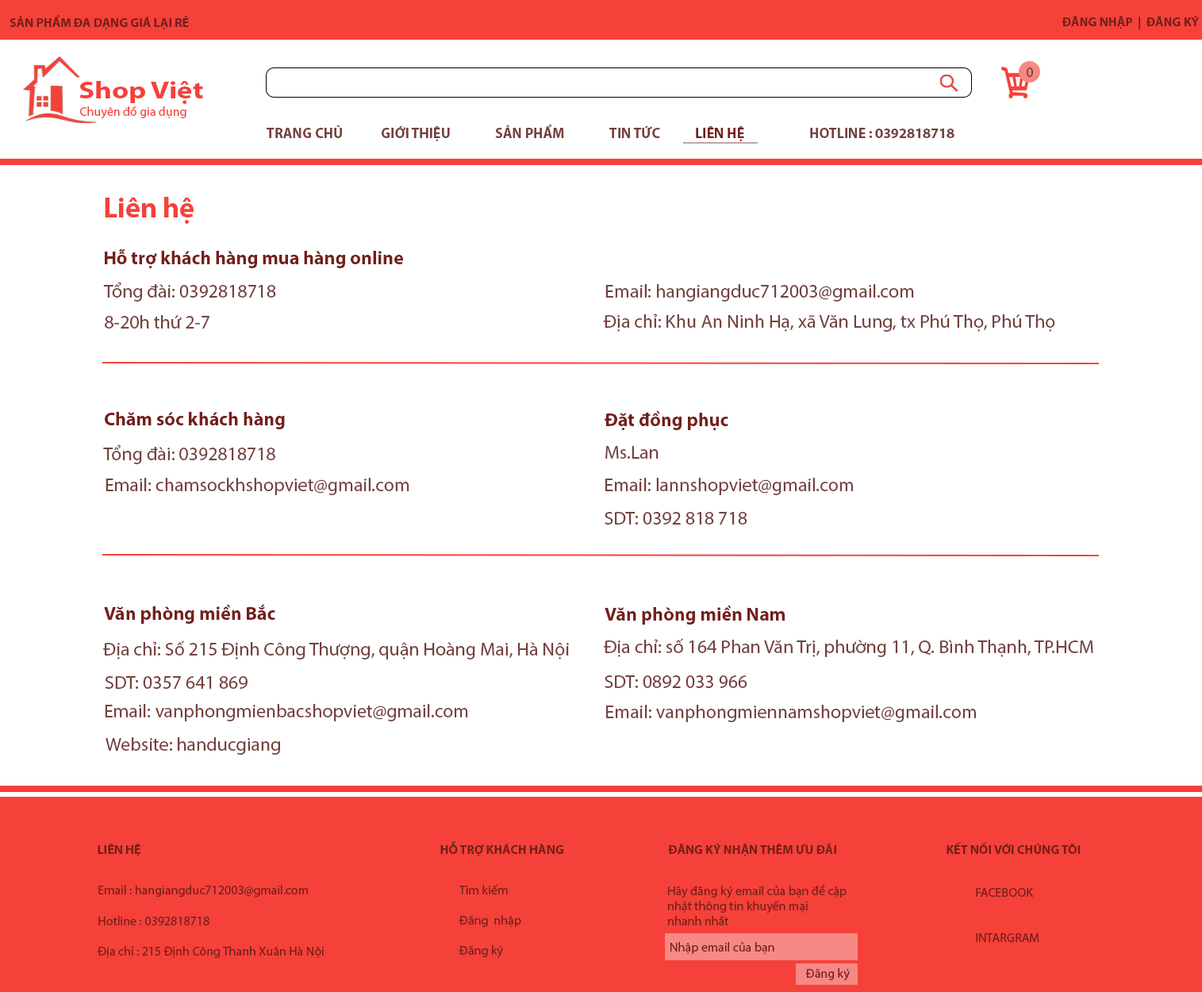
<style>
.page{position:relative;width:1202px;height:992px;background:#ffffff}
.page>*{position:absolute;margin:0}
.t1{font:12.7px "MyriadPro-Bold";color:#751f1b}
.t2{font:14.3px "MyriadPro-Regular";color:#75413e}
.t3{font:24.7px "MyriadPro-Bold";color:#f54139;scale:1.19 1}
.t4{font:12.7px "MyriadPro-Regular";color:#f54139}
.t5{font:12.7px "MyriadPro-Regular";color:#ffffff}
.t6{font:14.3px "MyriadPro-Bold";color:#75413e}
.t7{font:14.3px "MyriadPro-Bold";color:#751f1b}
.t8{font:28.3px "MyriadPro-Bold";color:#f54139}
.t9{font:18.9px "MyriadPro-Bold";color:#751f1b}
.t10{font:18.9px "MyriadPro-Regular";color:#75413e}
.t11{font:12.7px "MyriadPro-Bold";color:#751f1b;text-transform:uppercase}
.t12{font:12.7px "MyriadPro-Regular";color:#751f1b}
</style>
<div class="page">
<p class="t1" style="left:10px;top:15px;width:179px;height:15px">SẢN PHẨM ĐA DẠNG GIÁ LẠI RẺ</p>
<p class="t1" style="left:1063px;top:16px;width:136px;height:13px">ĐĂNG NHẬP  |  ĐĂNG KÝ</p>
<p class="t2" style="left:1027px;top:67px;width:6px;height:10px">0</p>
<p class="t3" style="left:79px;top:81px;width:124px;height:23px">Shop Việt</p>
<p class="t4" style="left:75px;top:106px;width:111px;height:13px"><span class="t5">s</span>Chuyên đồ gia dụng</p>
<p class="t6" style="left:267px;top:124px;width:688px;height:17px">TRANG CHỦ   GIỚI THIỆU  SẢN PHẨM   TIN TỨC  <span class="t7">LIÊN HỆ</span>   HOTLINE : 0392818718</p>
<p class="t8" style="left:105px;top:197px;width:89px;height:27px">Liên hệ</p>
<p class="t9" style="left:105px;top:249px;width:298px;height:20px">Hỗ trợ khách hàng mua hàng online</p>
<p class="t10" style="left:103px;top:282px;width:173px;height:20px">Tổng đài: 0392818718</p>
<p class="t10" style="left:605px;top:284px;width:309px;height:18px">Email: hangiangduc712003@gmail.com</p>
<p class="t10" style="left:105px;top:315px;width:104px;height:14px">8-20h thứ 2-7</p>
<p class="t10" style="left:603px;top:313px;width:452px;height:19px">Địa chỉ: Khu An Ninh Hạ, xã Văn Lung, tx Phú Thọ, Phú Thọ</p>
<p class="t9" style="left:105px;top:412px;width:180px;height:17px">Chăm sóc khách hàng</p>
<p class="t9" style="left:605px;top:411px;width:123px;height:20px">Đặt đồng phục</p>
<p class="t10" style="left:103px;top:444px;width:172px;height:20px">Tổng đài: 0392818718</p>
<p class="t10" style="left:605px;top:446px;width:54px;height:13px">Ms.Lan</p>
<p class="t10" style="left:106px;top:478px;width:303px;height:17px">Email: chamsockhshopviet@gmail.com</p>
<p class="t10" style="left:605px;top:478px;width:248px;height:17px">Email: lannshopviet@gmail.com</p>
<p class="t10" style="left:605px;top:512px;width:142px;height:13px">SDT: 0392 818 718</p>
<p class="t9" style="left:104px;top:604px;width:171px;height:20px">Văn phòng miền Bắc</p>
<p class="t9" style="left:605px;top:605px;width:180px;height:19px">Văn phòng miền Nam</p>
<p class="t10" style="left:103px;top:640px;width:466px;height:19px">Địa chỉ: Số 215 Định Công Thượng, quận Hoàng Mai, Hà Nội</p>
<p class="t10" style="left:604px;top:638px;width:489px;height:19px">Địa chỉ: số 164 Phan Văn Trị, phường 11, Q. Bình Thạnh, TP.HCM</p>
<p class="t10" style="left:105px;top:676px;width:143px;height:13px">SDT: 0357 641 869</p>
<p class="t10" style="left:605px;top:675px;width:142px;height:13px">SDT: 0892 033 966</p>
<p class="t10" style="left:105px;top:704px;width:363px;height:17px">Email: vanphongmienbacshopviet@gmail.com</p>
<p class="t10" style="left:606px;top:705px;width:370px;height:17px">Email: vanphongmiennamshopviet@gmail.com</p>
<p class="t10" style="left:106px;top:737px;width:174px;height:18px">Website: handucgiang</p>
<p class="t11" style="left:98px;top:841px;width:982px;height:16px"><span class="t1">LIÊN HỆ             HỖ TRỢ KHÁCH HÀNG     </span>Đăng ký nhận thêm ưu đãi             Kết nối với chúng tôi</p>
<p class="t12" style="left:98px;top:885px;width:226px;height:73px">Email : hangiangduc712003@gmail.com<br><br>Hotline : 0392818718<br><br>Địa chỉ : 215 Định Công Thanh Xuân Hà Nội</p>
<p class="t12" style="left:459px;top:884px;width:62px;height:74px">Tìm kiếm<br><br>Đăng  nhập<br><br>Đăng ký</p>
<p class="t12" style="left:668px;top:885px;width:179px;height:40px">Hãy đăng ký email của bạn để cập <br>nhật thông tin khuyến mại<br>nhanh nhất</p>
<p class="t12" style="left:976px;top:888px;width:64px;height:54px">FACEBOOK<br><br><br>INTARGRAM</p>
<p class="t12" style="left:671px;top:942px;width:103px;height:12px">Nhập email của bạn</p>
<p class="t12" style="left:805px;top:968px;width:45px;height:13px">Đăng ký</p>
</div>
